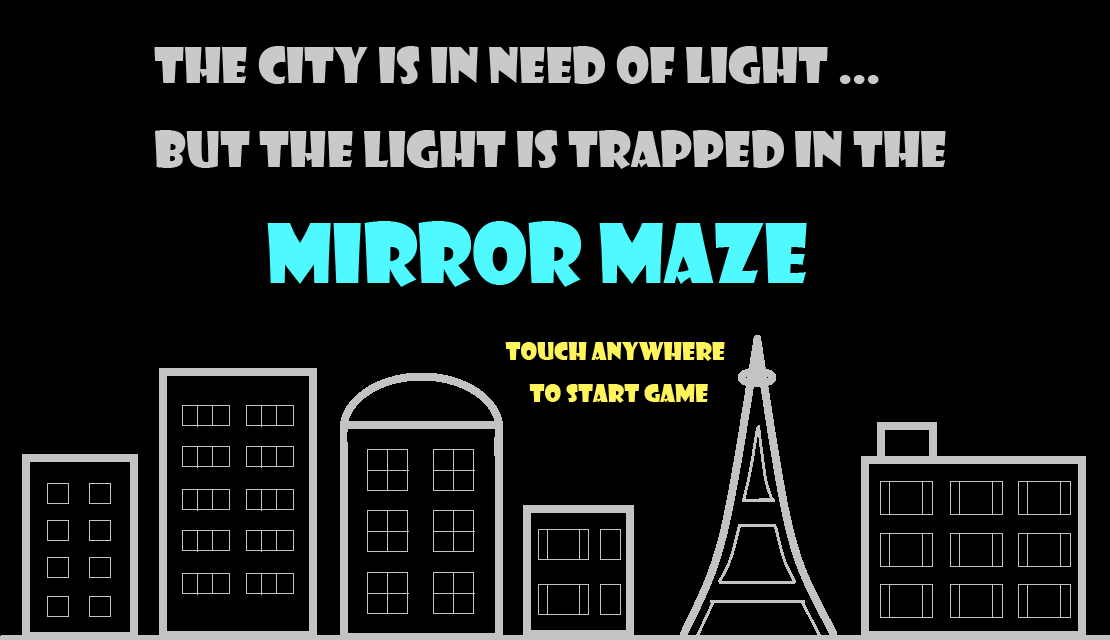
<style>
.page{position:relative;width:1110px;height:640px;background:#000000}
.page>*{position:absolute;margin:0}
.t1{font:48px "ShowcardGothic-Reg";color:#c9c9c9}
.t2{font:80px "ShowcardGothic-Reg";color:#4ef9ff}
.t3{font:24px "ShowcardGothic-Reg";color:#fff45c}
</style>
<div class="page">
<p class="t1" style="left:154px;top:46px;width:792px;height:123px">The city is in need of light ...<br>but the light is trapped in the</p>
<p class="t2" style="left:267px;top:221px;width:540px;height:66px">Mirror maze</p>
<p class="t3" style="left:505px;top:342px;width:220px;height:61px">touch anywhere<br>     to start game</p>
</div>
